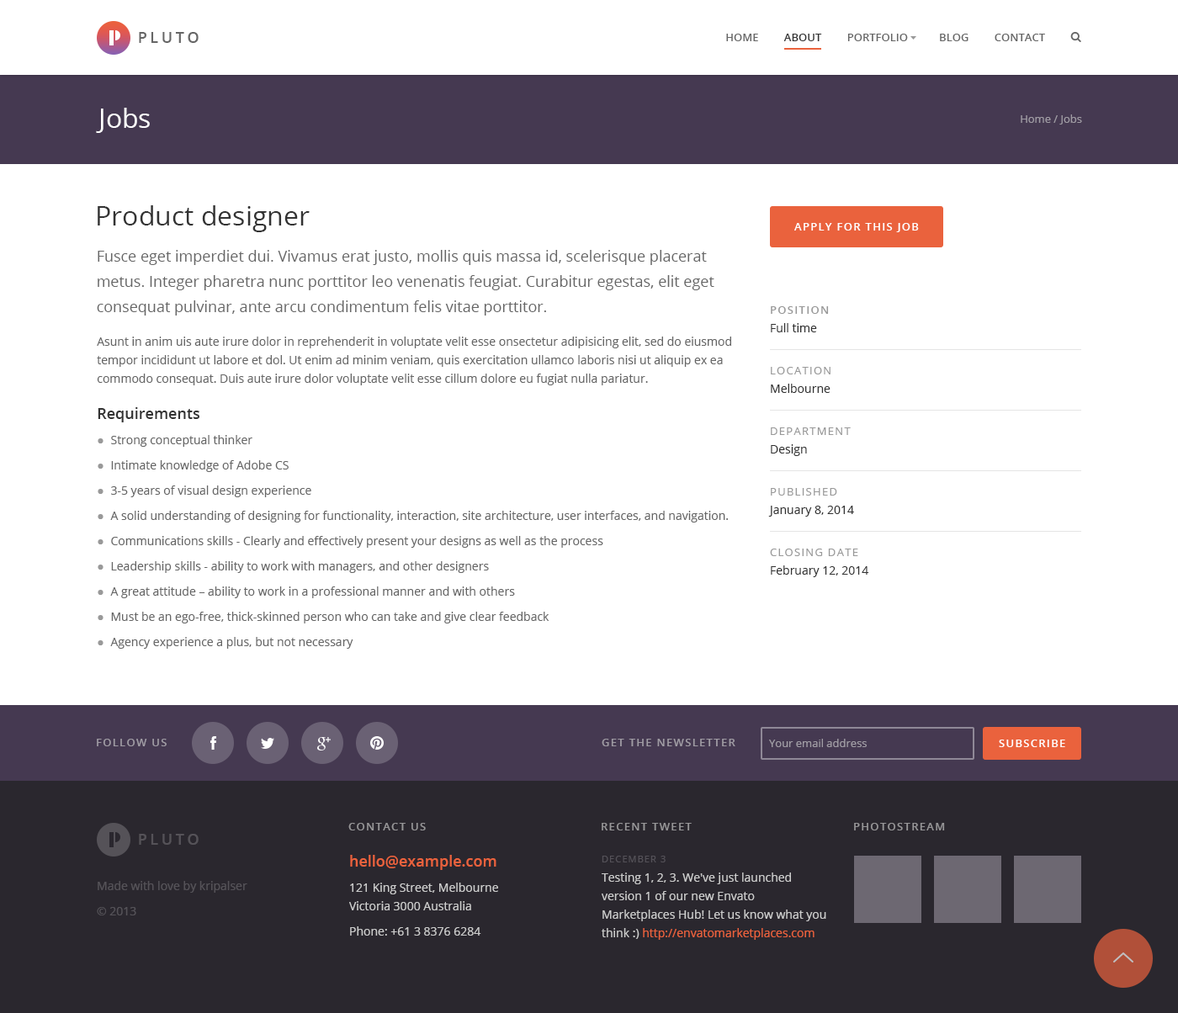
<style>
.page{position:relative;width:1178px;height:1013px;background:#ffffff}
.page>*{position:absolute;margin:0}
.t1{font:15.1px "OpenSans-Semibold";letter-spacing:0.2em;color:#666666;text-transform:uppercase}
.t2{font:10.9px "OpenSans-Semibold";color:#666666;text-transform:uppercase}
.t3{font:10.9px "OpenSans-Semibold";color:#333333;text-transform:uppercase}
.t4{font:26.9px "OpenSans";color:#ffffff}
.t5{font:10.9px "OpenSans";color:#a09ca4}
.t6{font:26.9px "OpenSans";color:#333333}
.t7{font:10.9px "OpenSans-Semibold";letter-spacing:0.1em;color:#ffffff;text-transform:uppercase}
.t8{font:15.1px/25.2px "OpenSans";color:#666666}
.t9{font:11.8px/18.5px "OpenSans";color:#333333}
.t10{font:10.9px/18.5px "OpenSans-Semibold";letter-spacing:0.1em;color:#999999;text-transform:uppercase}
.t11{font:11.8px/18.5px "OpenSans";color:#666666}
.t12{font:15.1px/36.2px "OpenSans-Semibold";color:#333333}
.t13{font:11.8px/25.2px "ArialMT";color:#999999}
.t14{font:11.8px/25.2px "OpenSans";color:#666666}
.t15{font:10.9px/18.5px "OpenSans";letter-spacing:0.1em;color:#999999;text-transform:uppercase}
.t16{font:10.9px "OpenSans-Semibold";letter-spacing:0.1em;color:#a09ca4;text-transform:uppercase}
.t17{font:15.1px "OpenSans-Semibold";letter-spacing:0.2em;color:#555258;text-transform:uppercase}
.t18{font:10.9px "OpenSans-Semibold";letter-spacing:0.1em;color:#979698;text-transform:uppercase}
.t19{font:11.8px/25.2px "OpenSans";color:#cccccc}
.t20{font:15.1px/20.2px "OpenSans-Semibold";color:#ea623d}
.t21{font:11.8px/18.5px "OpenSans";color:#cccccc}
.t22{font:9.3px "OpenSans";letter-spacing:0.1em;color:#545158;text-transform:uppercase}
.t23{font:11.8px/25.2px "OpenSans";color:#555258}
.t24{font:11.8px/19.3px "OpenSans";color:#cccccc}
.t25{font:11.8px/18.5px "OpenSans";color:#ea623d}
</style>
<div class="page">
<p class="t1" style="left:139px;top:32px;width:59px;height:11px">Pluto</p>
<p class="t2" style="left:726px;top:34px;width:319px;height:7px">Home         <span class="t3">About         </span>Portfolio           Blog         Contact</p>
<p class="t4" style="left:96px;top:108px;width:54px;height:25px">Jobs</p>
<p class="t5" style="left:1020px;top:114px;width:62px;height:10px">Home / Jobs</p>
<p class="t6" style="left:98px;top:205px;width:212px;height:27px">Product designer</p>
<p class="t7" style="left:794px;top:223px;width:124px;height:9px">Apply for this job</p>
<p class="t8" style="left:97px;top:250px;width:617px;height:65px">Fusce eget imperdiet dui. Vivamus erat justo, mollis quis massa id, scelerisque placerat metus. Integer pharetra nunc porttitor leo venenatis feugiat. Curabitur egestas, elit eget consequat pulvinar, ante arcu condimentum felis vitae porttitor.</p>
<p class="t9" style="left:770px;top:306px;width:58px;height:26px"><span class="t10">Position<br></span>Full time</p>
<p class="t11" style="left:97px;top:336px;width:634px;height:312px">Asunt in anim uis aute irure dolor in reprehenderit in voluptate velit esse onsectetur adipisicing elit, sed do eiusmod tempor incididunt ut labore et dol. Ut enim ad minim veniam, quis exercitation ullamco laboris nisi ut aliquip ex ea commodo consequat. Duis aute irure dolor voluptate velit esse cillum dolore eu fugiat nulla pariatur.<br><span class="t12">Requirements<br></span><span class="t13">●  </span><span class="t14">Strong conceptual thinker<br></span><span class="t13">●  </span><span class="t14">Intimate knowledge of Adobe CS<br></span><span class="t13">●  </span><span class="t14">3-5 years of visual design experience<br></span><span class="t13">●  </span><span class="t14">A solid understanding of designing for functionality, interaction, site architecture, user interfaces, and navigation.<br></span><span class="t13">●  </span><span class="t14">Communications skills - Clearly and effectively present your designs as well as the process <br></span><span class="t13">●  </span><span class="t14">Leadership skills - ability to work with managers, and other designers<br></span><span class="t13">●  </span><span class="t14">A great attitude – ability to work in a professional manner and with others <br></span><span class="t13">●  </span><span class="t14">Must be an ego-free, thick-skinned person who can take and give clear feedback<br></span><span class="t13">●  </span><span class="t14">Agency experience a plus, but not necessary</span></p>
<p class="t9" style="left:770px;top:367px;width:60px;height:26px"><span class="t15">Location<br></span>Melbourne</p>
<p class="t15" style="left:770px;top:427px;width:80px;height:29px">Department<br><span class="t9">Design</span></p>
<p class="t9" style="left:768px;top:488px;width:86px;height:28px"><span class="t15">Published<br></span>January 8, 2014</p>
<p class="t9" style="left:770px;top:548px;width:99px;height:29px"><span class="t15">Closing date<br></span>February 12, 2014</p>
<p class="t16" style="left:97px;top:738px;width:70px;height:8px">Follow us</p>
<p class="t16" style="left:601px;top:738px;width:134px;height:8px">Get the newsletter</p>
<p class="t5" style="left:769px;top:738px;width:97px;height:9px">Your email address</p>
<p class="t7" style="left:998px;top:739px;width:67px;height:8px">Subscribe</p>
<p class="t17" style="left:139px;top:834px;width:59px;height:10px">Pluto</p>
<p class="t18" style="left:348px;top:823px;width:78px;height:7px">Contact us</p>
<p class="t18" style="left:601px;top:823px;width:90px;height:7px">Recent tweet</p>
<p class="t18" style="left:854px;top:823px;width:91px;height:7px">Photostream</p>
<p class="t19" style="left:349px;top:855px;width:149px;height:80px"><span class="t20">hello@example.com<br></span>121 King Street, Melbourne <br><span class="t21">Victoria 3000 Australia<br></span>Phone: +61 3 8376 6284</p>
<p class="t22" style="left:601px;top:855px;width:64px;height:7px">December 3</p>
<p class="t23" style="left:97px;top:881px;width:150px;height:34px">Made with love by kripalser<br>© 2013</p>
<p class="t21" style="left:601px;top:872px;width:225px;height:67px"><span class="t24">Testing 1, 2, 3. We've just launched </span>version 1 of our new Envato Marketplaces Hub! Let us know what you think :) <span class="t25">http://envatomarketplaces.com</span></p>
</div>
